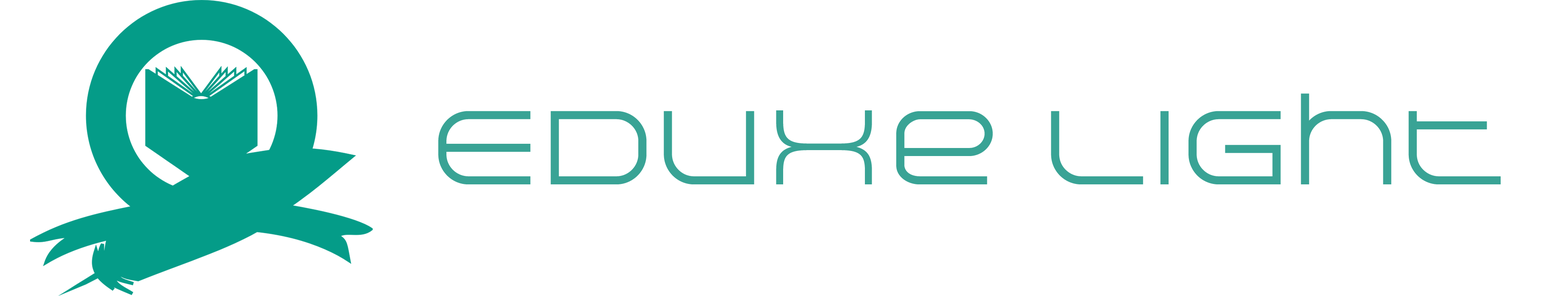
<style>
.page{position:relative;width:1568px;height:296px;background:#ffffff}
.page>*{position:absolute;margin:0}
.t1{font:105.9px "Arkitech";color:#39a395}
</style>
<div class="page">
<p class="t1" style="left:438px;top:94px;width:1063px;height:91px">Eduxe Light</p>
</div>
